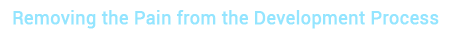
<style>
.page{position:relative;width:452px;height:31px;background:#ffffff}
.page>*{position:absolute;margin:0}
.t1{font:18px "Roboto-Regular";color:#94e5ff;font-weight:bold}
</style>
<div class="page">
<p class="t1" style="left:13px;top:10px;width:426px;height:19px">Removing the Pain from the Development Process</p>
</div>
